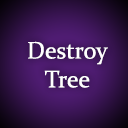
<style>
.page{position:relative;width:128px;height:128px}
.page>*{position:absolute;margin:0}
.t1{font:24px "Constantia";color:#ffffff}
</style>
<div class="page">
<p class="t1" style="left:28px;top:41px;width:80px;height:47px;text-align:center">Destroy <br>Tree</p>
</div>
